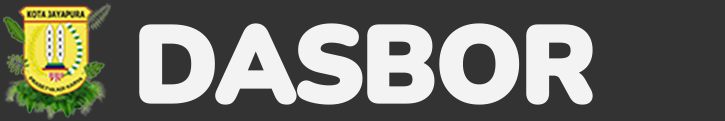
<style>
.page{position:relative;width:725px;height:121px;background:#333333}
.page>*{position:absolute;margin:0}
.t1{font:107px "Nunito-Black";letter-spacing:-0.04em;color:#ffffff;font-weight:bold}
</style>
<div class="page">
<p class="t1" style="left:139px;top:23px;width:454px;height:82px">DASBOR</p>
</div>
